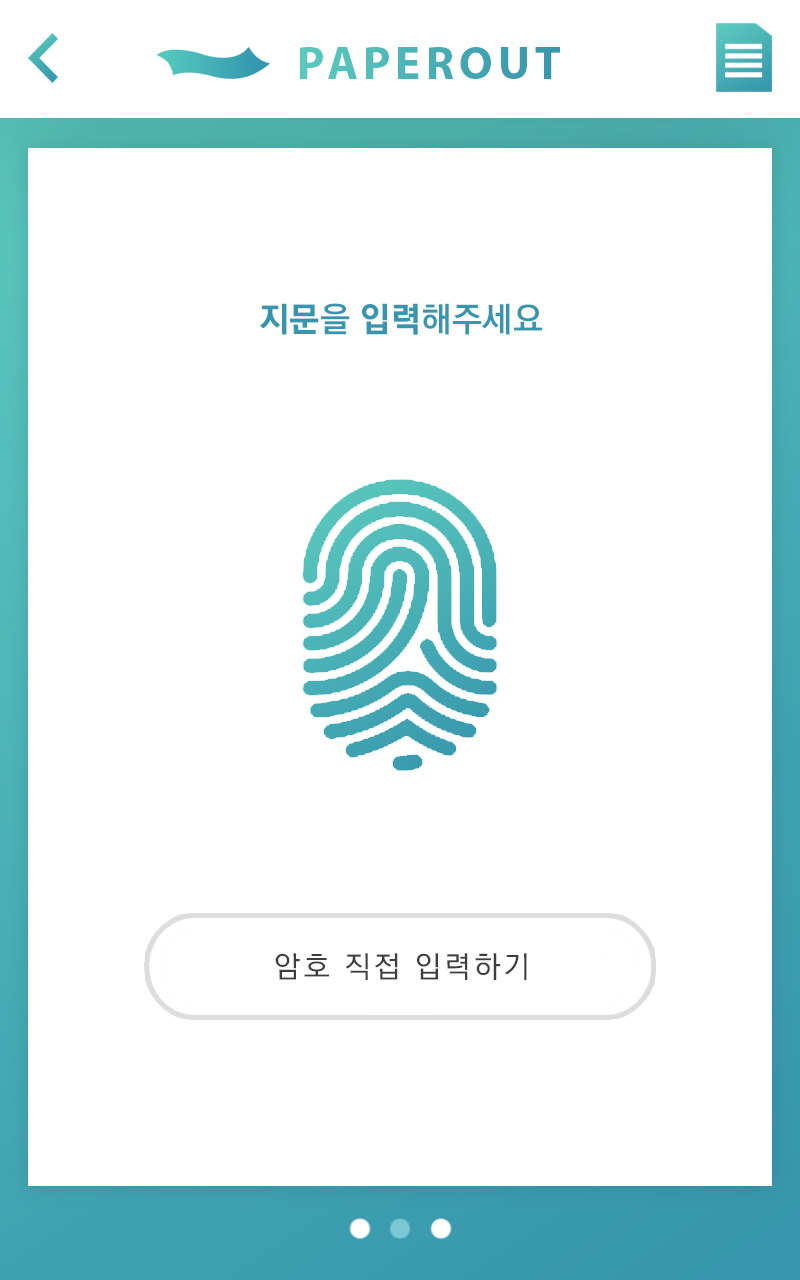
<style>
.page{position:relative;width:800px;height:1280px;background:#ffffff}
.page>*{position:absolute;margin:0}
.t1{font:46.9px "MyriadPro-Bold";letter-spacing:0.11em;color:#49afb5}
.t2{font:34.6px "KoreanGD15-R";color:#3796ad}
.t3{font:34.6px "KoreanGD17-R";color:#3796ad}
.t4{font:30px "KoreanGD13-R";letter-spacing:0.1em;color:#3d3d3d}
</style>
<div class="page">
<p class="t1" style="left:300px;top:47px;width:260px;height:32px">PAPEROUT</p>
<p class="t2" style="left:260px;top:303px;width:283px;height:32px"><span class="t3">지문</span>을 <span class="t3">입력</span>해주세요</p>
<p class="t4" style="left:275px;top:953px;width:252px;height:27px">암호 직접 입력하기</p>
</div>
